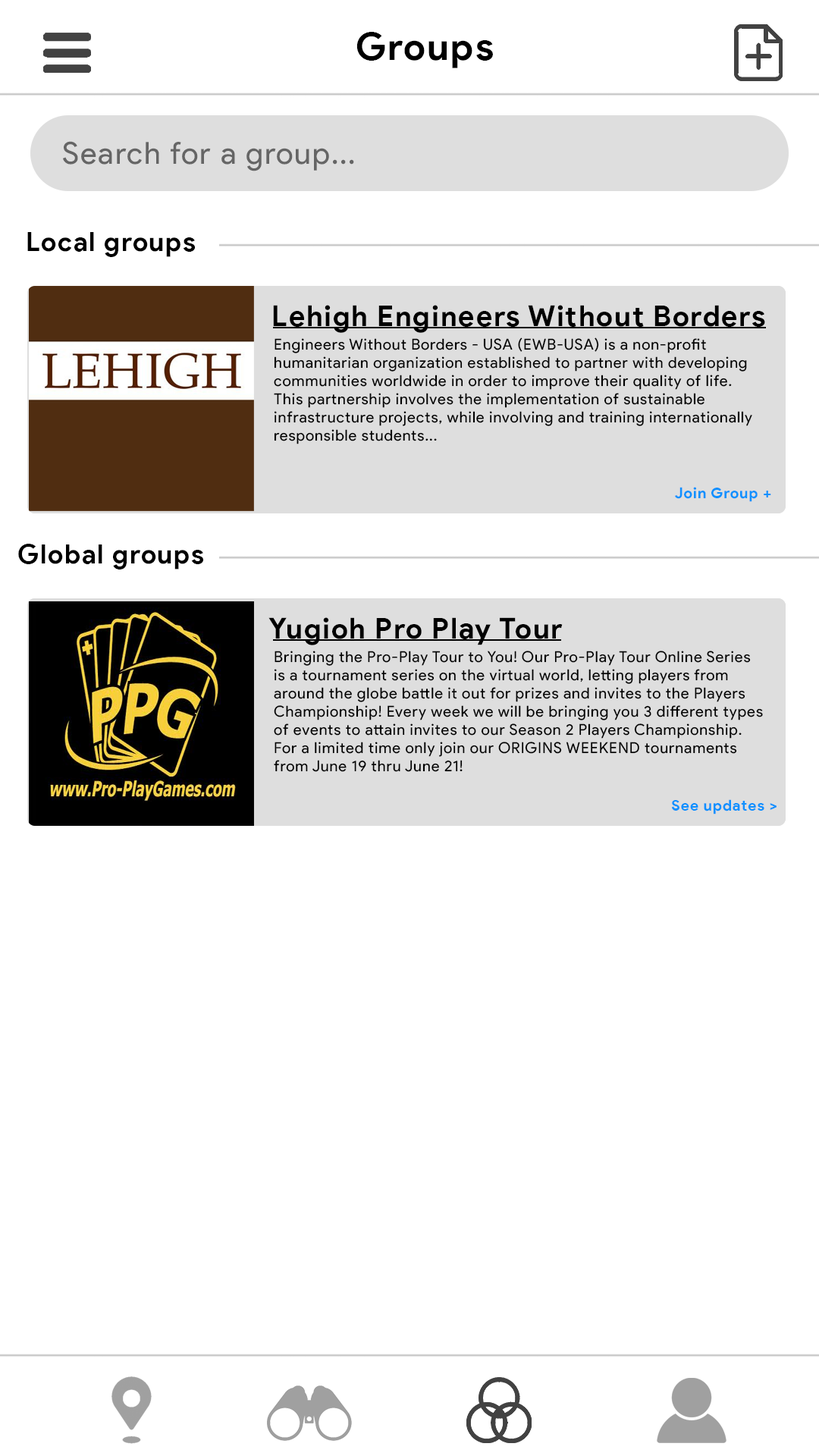
<style>
.page{position:relative;width:819px;height:1456px;background:#ffffff}
.page>*{position:absolute;margin:0}
.t1{font:37.9px "ProductSans-Bold";letter-spacing:0.05em;color:#000000}
.t2{font:30.3px "ProductSans-Regular";letter-spacing:0.05em;color:#656565}
.t3{font:26.5px "ProductSans-Bold";letter-spacing:0.05em;color:#000000}
.t4{font:28.8px "ProductSans-Bold";letter-spacing:0.05em;color:#000000}
.t5{font:15.2px/18.2px "ProductSans-Regular";letter-spacing:0.05em;color:#000000}
.t6{font:15.2px "ProductSans-Bold";letter-spacing:0.05em;color:#1091ff}
</style>
<div class="page">
<p class="t1" style="left:356px;top:32px;width:137px;height:36px">Groups</p>
<p class="t2" style="left:63px;top:141px;width:291px;height:30px">Search for a group...</p>
<p class="t3" style="left:27px;top:232px;width:168px;height:25px">Local groups</p>
<p class="t4" style="left:273px;top:305px;width:492px;height:28px">Lehigh Engineers Without Borders</p>
<p class="t5" style="left:274px;top:337px;width:478px;height:107px">Engineers Without Borders - USA (EWB-USA) is a non-profit <br>humanitarian organization established to partner with developing <br>communities worldwide in order to improve their quality of life. <br>This partnership involves the implementation of sustainable <br>infrastructure projects, while involving and training internationally <br>responsible students...</p>
<p class="t6" style="left:675px;top:487px;width:96px;height:15px">Join Group +</p>
<p class="t3" style="left:18px;top:544px;width:185px;height:26px">Global groups</p>
<p class="t4" style="left:268px;top:617px;width:295px;height:28px">Yugioh Pro Play Tour</p>
<p class="t5" style="left:274px;top:651px;width:489px;height:121px">Bringing the Pro-Play Tour to You! Our Pro-Play Tour Online Series <br>is a tournament series on the virtual world, letting players from <br>around the globe battle it out for prizes and invites to the Players <br>Championship! Every week we will be bringing you 3 different types <br>of events to attain invites to our Season 2 Players Championship.<br>For a limited time only join our ORIGINS WEEKEND tournaments <br>from June 19 thru June 21!</p>
<p class="t6" style="left:671px;top:799px;width:106px;height:15px">See updates &gt;</p>
</div>
